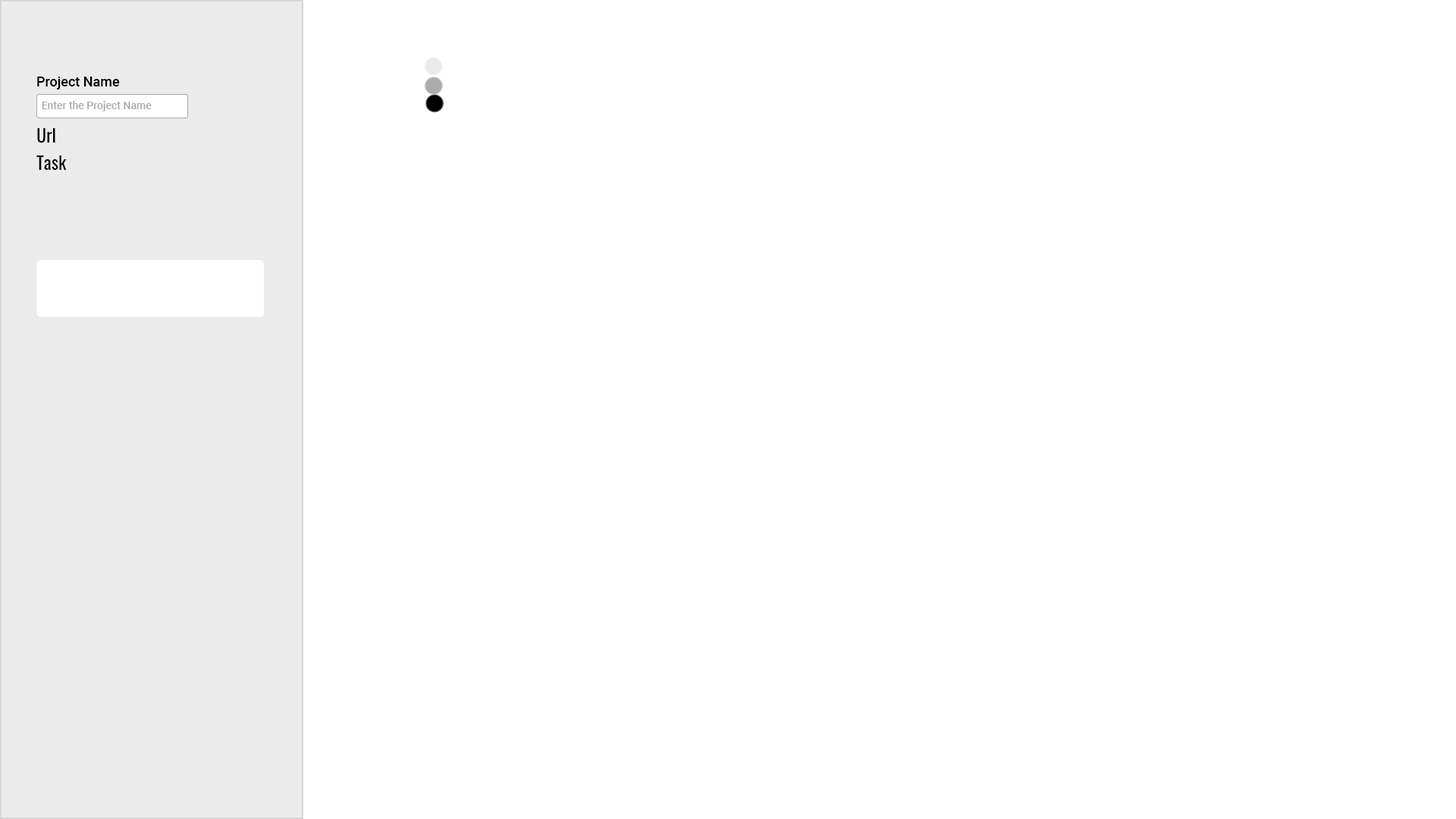
<style>
.page{position:relative;width:1456px;height:819px;background:#ffffff}
.page>*{position:absolute;margin:0}
.t1{font:13.6px "Roboto-Medium";color:#000000}
.t2{font:10.6px "Roboto-Medium";color:#acacac}
.t3{font:18.2px "Oswald-Regular";color:#000000}
</style>
<div class="page">
<p class="t1" style="left:37px;top:77px;width:83px;height:12px">Project Name</p>
<p class="t2" style="left:42px;top:101px;width:110px;height:10px">Enter the Project Name</p>
<p class="t3" style="left:37px;top:128px;width:18px;height:15px">Url</p>
<p class="t3" style="left:36px;top:155px;width:31px;height:15px">Task</p>
</div>
